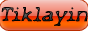
<style>
.page{position:relative;width:88px;height:31px}
.page>*{position:absolute;margin:0}
.t1{font:19px "X-Files-Regular";font-style:italic}
</style>
<div class="page">
<p class="t1" style="left:1px;top:7px;width:87px;height:19px">Tiklayin</p>
</div>
